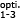
<style>
.page{position:relative;width:24px;height:24px;background:#ffffff}
.page>*{position:absolute;margin:0}
.t1{font:8.8px "MSReferenceSansSerif";color:#000000;scale:1.04 1}
</style>
<div class="page">
<p class="t1" style="left:0px;top:1px;width:20px;height:17px">opti.<br>1-3</p>
</div>
